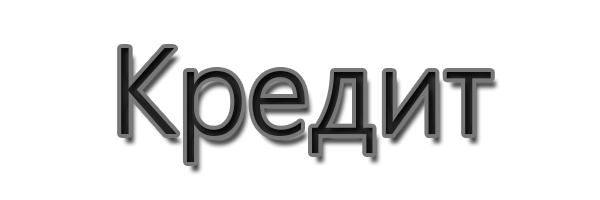
<style>
.page{position:relative;width:600px;height:200px;background:#ffffff}
.page>*{position:absolute;margin:0}
.t1{font:120px "MalgunGothic-Semilight";color:#181818}
</style>
<div class="page">
<p class="t1" style="left:121px;top:48px;width:370px;height:114px">Кредит</p>
</div>
